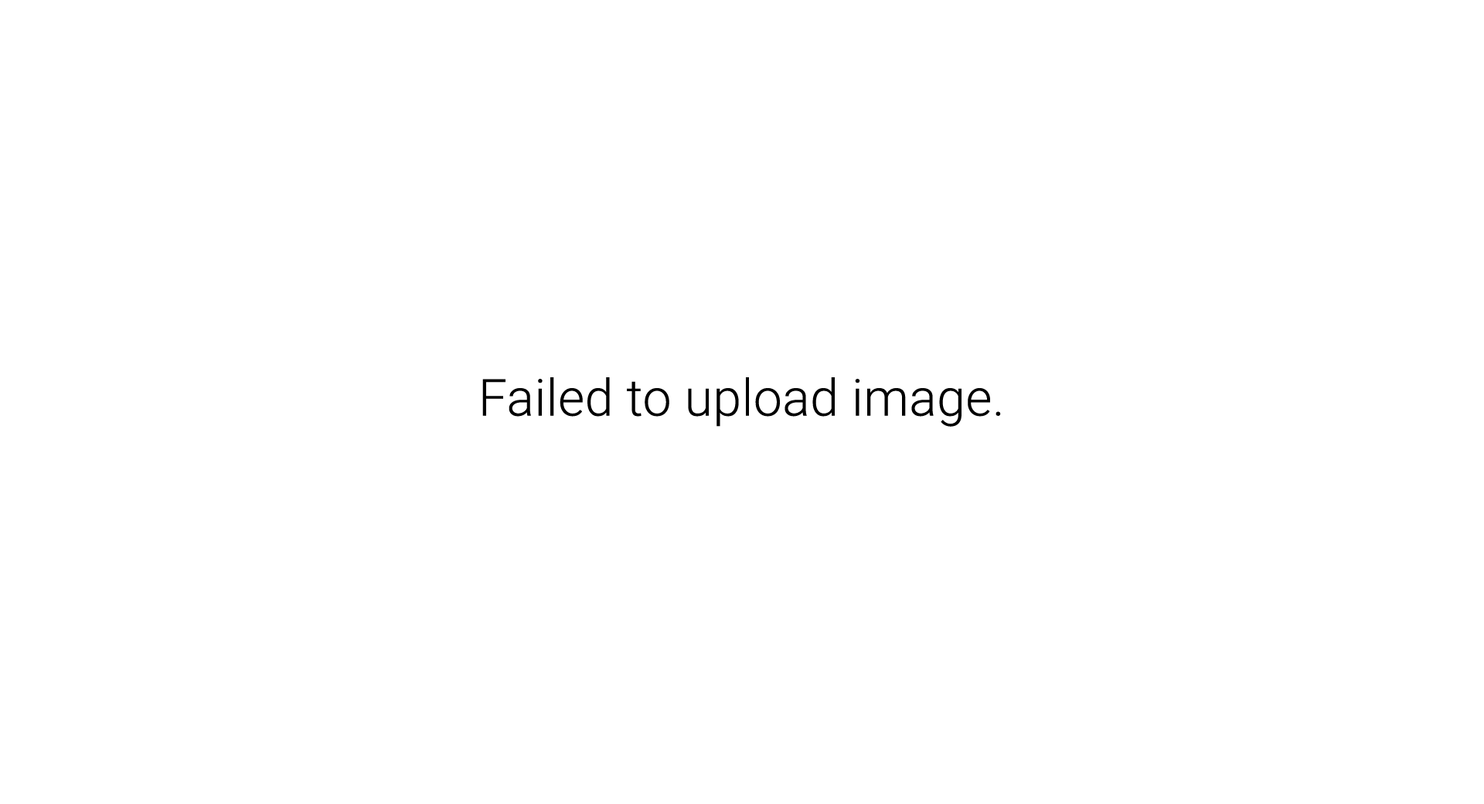
<style>
.page{position:relative;width:1484px;height:804px;background:#ffffff}
.page>*{position:absolute;margin:0}
.t1{font:51px "Roboto-Light";letter-spacing:0.008em;color:#000000}
</style>
<div class="page">
<p class="t1" style="left:482px;top:377px;width:519px;height:50px">Failed to upload image.</p>
</div>
